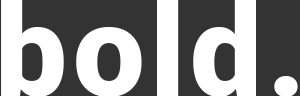
<style>
.page{position:relative;width:300px;height:96px;background:#333333}
.page>*{position:absolute;margin:0}
.t1{font:128px "Roboto-Black";letter-spacing:0.04em;color:#ffffff}
</style>
<div class="page">
<p class="t1" style="left:1px;top:0px;width:297px;height:97px">bold.</p>
</div>
